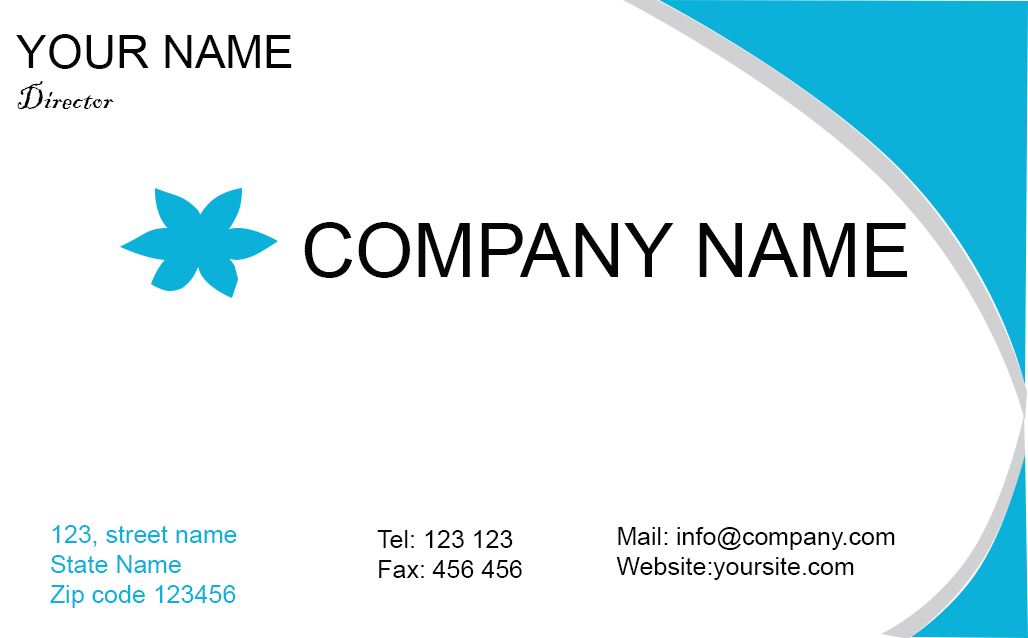
<style>
.page{position:relative;width:1028px;height:638px;background:#ffffff}
.page>*{position:absolute;margin:0}
.t1{font:45.8px "ArialMT";color:#060606}
.t2{font:33.3px "BlackadderITC-Regular";color:#060606}
.t3{font:75px "ArialMT";color:#060606}
.t4{font:25px "ArialMT";color:#0cb1da}
.t5{font:25px "ArialMT";color:#060606}
</style>
<div class="page">
<p class="t1" style="left:16px;top:34px;width:276px;height:75px">YOUR NAME<br><span class="t2">Director</span></p>
<p class="t3" style="left:304px;top:222px;width:603px;height:56px">COMPANY NAME</p>
<p class="t4" style="left:50px;top:525px;width:187px;height:83px">123, street name<br>State Name<br>Zip code 123456</p>
<p class="t5" style="left:377px;top:530px;width:145px;height:48px">Tel: 123 123<br>Fax: 456 456</p>
<p class="t5" style="left:616px;top:527px;width:279px;height:53px">Mail: info@company.com<br>Website:yoursite.com</p>
</div>
